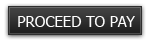
<style>
.page{position:relative;width:150px;height:42px;background:#ffffff}
.page>*{position:absolute;margin:0}
.t1{font:15px "Tahoma";color:#ffffff}
</style>
<div class="page">
<p class="t1" style="left:18px;top:16px;width:117px;height:11px">PROCEED TO PAY</p>
</div>
